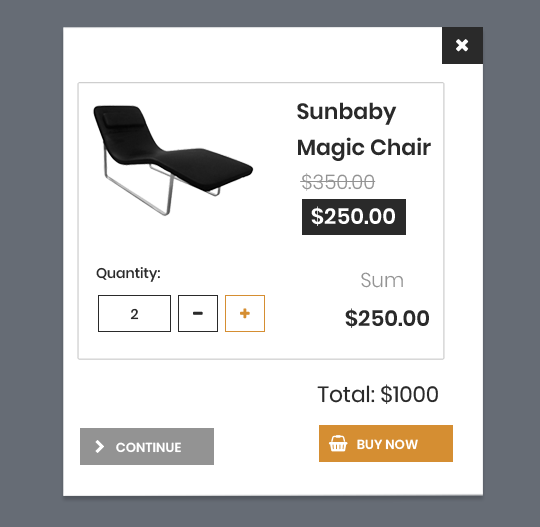
<style>
.page{position:relative;width:540px;height:527px;background:#ffffff}
.page>*{position:absolute;margin:0}
.t1{font:22px/36px "Poppins-SemiBold";color:#2a2a2a}
.t2{font:20px "Poppins-Light";color:#939393}
.t3{font:22px "Poppins-SemiBold";color:#ffffff}
.t4{font:14px "Poppins-Medium";color:#2a2a2a}
.t5{font:22px "Poppins-SemiBold";color:#2a2a2a}
.t6{font:22px "Poppins-Regular";color:#2a2a2a}
.t7{font:13px "Poppins-SemiBold";color:#ffffff;text-transform:uppercase}
</style>
<div class="page">
<p class="t1" style="left:297px;top:102px;width:134px;height:59px">Sunbaby <br>Magic Chair</p>
<p class="t2" style="left:302px;top:173px;width:73px;height:18px">$350.00</p>
<p class="t3" style="left:311px;top:206px;width:84px;height:20px">$250.00</p>
<p class="t4" style="left:96px;top:267px;width:64px;height:15px">Quantity:</p>
<p class="t2" style="left:361px;top:272px;width:42px;height:16px">Sum</p>
<p class="t4" style="left:130px;top:308px;width:9px;height:12px">2</p>
<p class="t5" style="left:345px;top:308px;width:84px;height:20px">$250.00</p>
<p class="t6" style="left:317px;top:384px;width:121px;height:20px">Total: $1000</p>
<p class="t7" style="left:116px;top:442px;width:65px;height:11px">continue</p>
<p class="t7" style="left:357px;top:439px;width:61px;height:11px">buy now</p>
</div>
